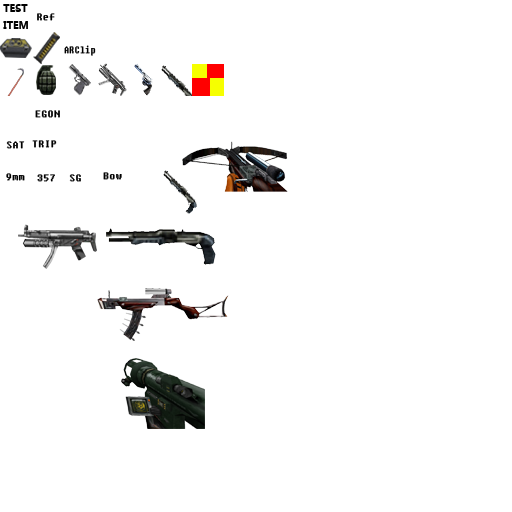
<style>
.page{position:relative;width:512px;height:512px;background:#ffffff}
.page>*{position:absolute;margin:0}
.t1{font:10px "MicrosoftYaHei-Bold";color:#000000}
.t2{font:12.5px "Fixedsys";color:#000000}
.t3{font:12.7px "Fixedsys";color:#000000;scale:0.84 1}
.t4{font:12.7px "Fixedsys";color:#000000}
</style>
<div class="page">
<p class="t1" style="left:3px;top:4px;width:25px;height:25px">TEST<br>ITEM</p>
<p class="t2" style="left:37px;top:13px;width:18px;height:8px">Ref</p>
<p class="t3" style="left:64px;top:45px;width:32px;height:11px">ARClip</p>
<p class="t4" style="left:35px;top:110px;width:25px;height:8px">EGON</p>
<p class="t2" style="left:6px;top:141px;width:19px;height:8px">SAT</p>
<p class="t2" style="left:32px;top:140px;width:25px;height:8px">TRIP</p>
<p class="t2" style="left:6px;top:173px;width:19px;height:8px">9mm</p>
<p class="t2" style="left:37px;top:174px;width:18px;height:8px">357</p>
<p class="t2" style="left:69px;top:174px;width:12px;height:8px">SG</p>
<p class="t2" style="left:103px;top:172px;width:19px;height:8px">Bow</p>
</div>
